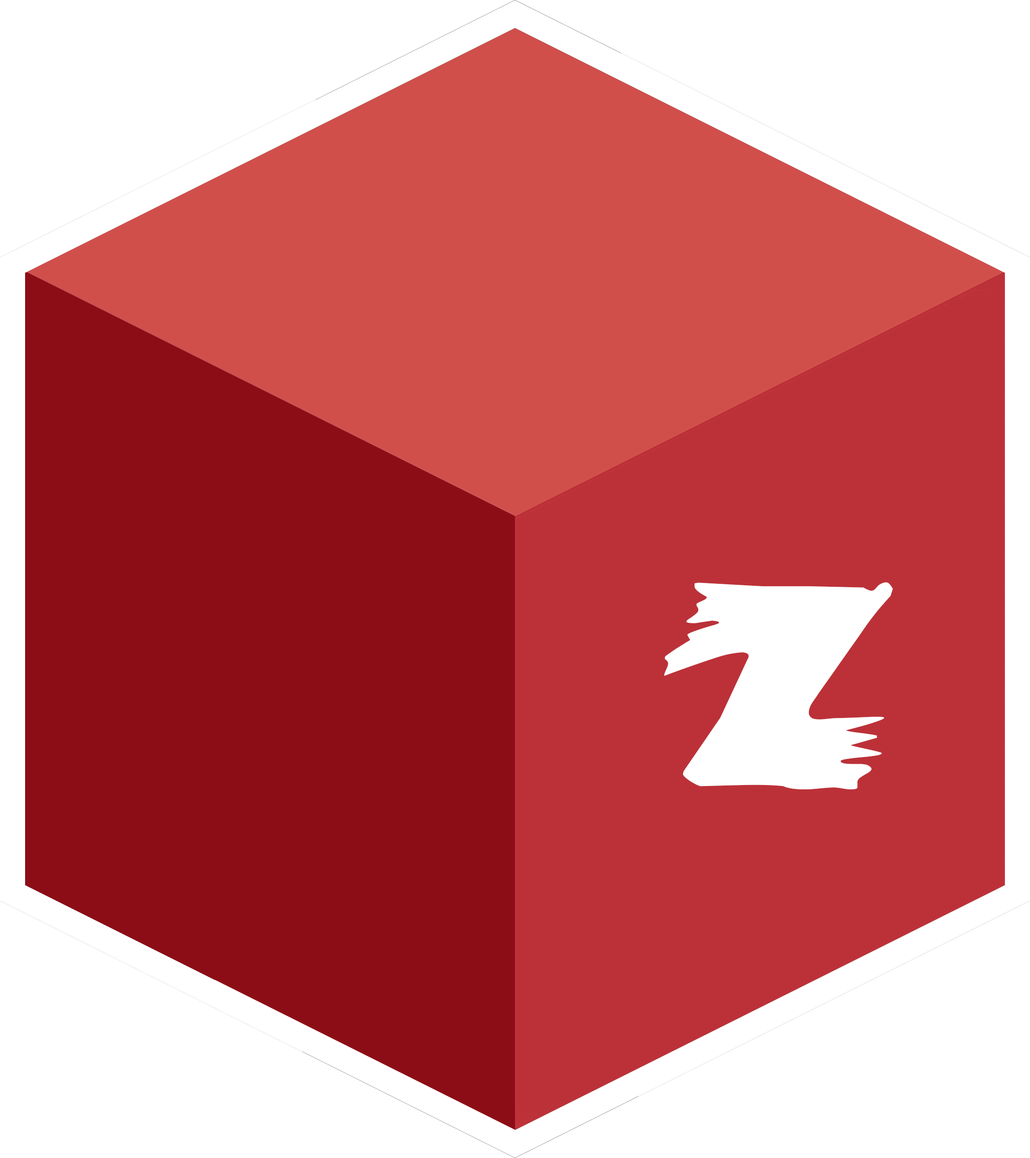
<style>
.page{position:relative;width:1030px;height:1158px;background:#ffffff}
.page>*{position:absolute;margin:0}
.t1{font:321.7px "DSZombieCyr";color:#ffffff}
</style>
<div class="page">
<p class="t1" style="left:664px;top:582px;width:229px;height:207px">Z</p>
</div>
